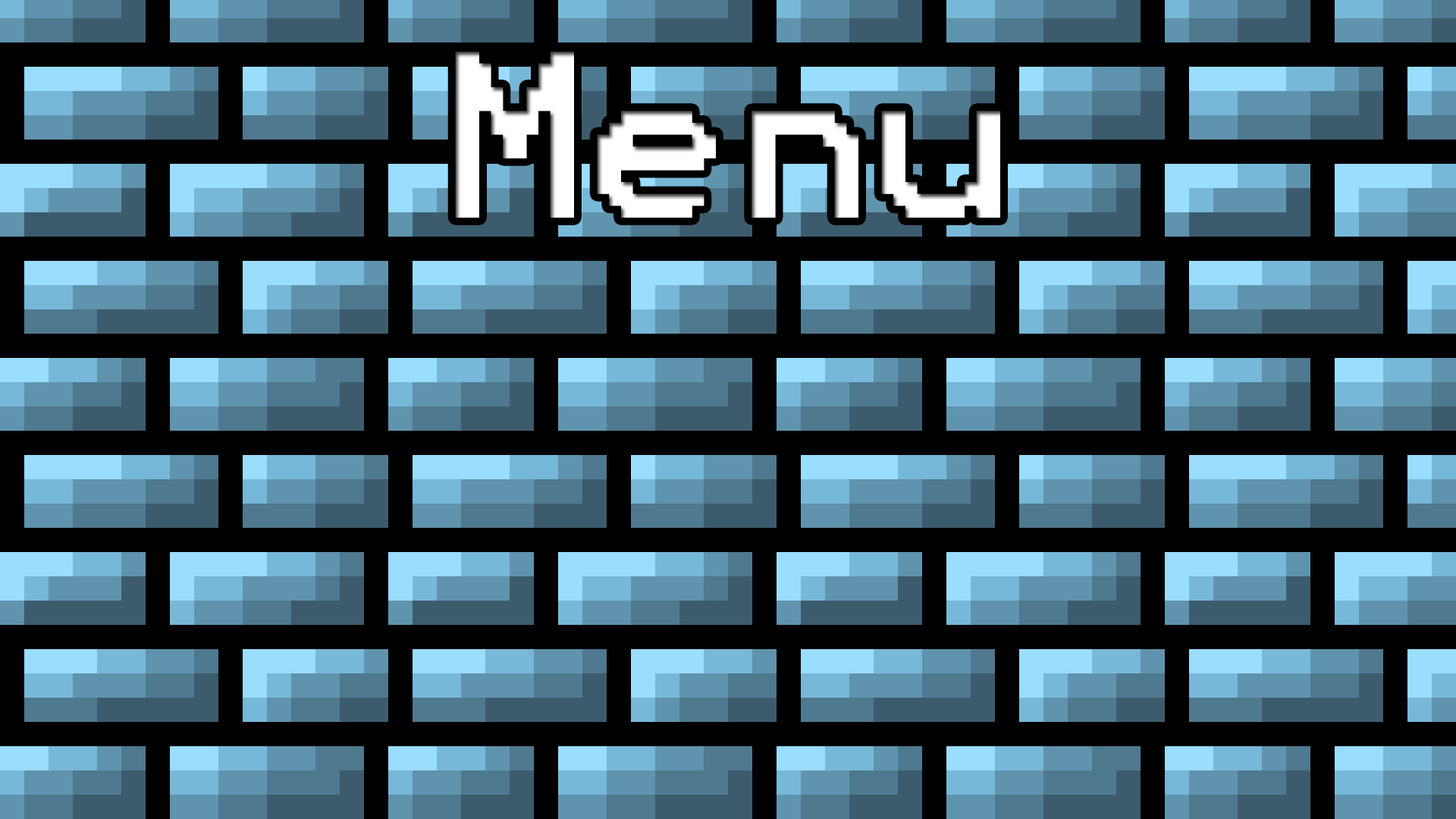
<style>
.page{position:relative;width:1456px;height:819px;background:#000000}
.page>*{position:absolute;margin:0}
.t1{font:189.6px "Terminal";color:#ffffff}
</style>
<div class="page">
<p class="t1" style="left:455px;top:52px;width:545px;height:166px">Menu</p>
</div>
